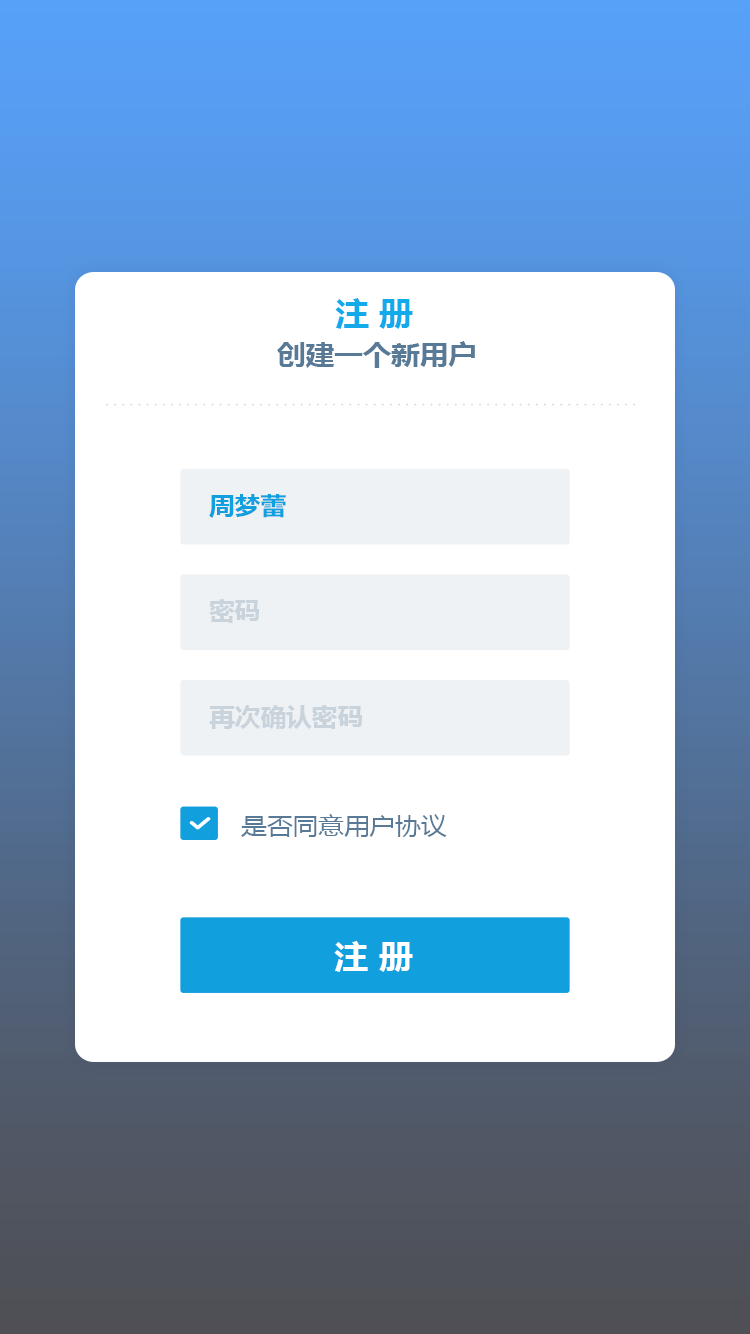
<style>
.page{position:relative;width:750px;height:1334px;background:#ffffff}
.page>*{position:absolute;margin:0}
.t1{font:32px "MicrosoftYaHei-Bold";color:#12aaeb;text-transform:uppercase;scale:1.07 1}
.t2{font:26.7px "MicrosoftYaHei-Bold";color:#597a96;text-transform:uppercase;scale:1.07 1}
.t3{font:24px "MicrosoftYaHei-Bold";color:#129fdd;text-transform:uppercase;scale:1.07 1}
.t4{font:24px "MicrosoftYaHei-Bold";color:#c8d3dc;text-transform:uppercase;scale:1.07 1}
.t5{font:24px "MicrosoftYaHei";color:#597a96;text-transform:uppercase;scale:1.07 1}
.t6{font:32px "MicrosoftYaHei-Bold";color:#ffffff;text-transform:uppercase;scale:1.07 1}
</style>
<div class="page">
<p class="t1" style="left:335px;top:298px;width:78px;height:31px">注 册</p>
<p class="t2" style="left:277px;top:341px;width:198px;height:27px">创建一个新用户</p>
<p class="t3" style="left:209px;top:494px;width:77px;height:24px">周梦蕾</p>
<p class="t4" style="left:209px;top:599px;width:50px;height:24px">密码</p>
<p class="t4" style="left:209px;top:705px;width:153px;height:24px">再次确认密码</p>
<p class="t5" style="left:241px;top:814px;width:206px;height:23px">是否同意用户协议</p>
<p class="t6" style="left:334px;top:941px;width:79px;height:31px">注 册</p>
</div>
